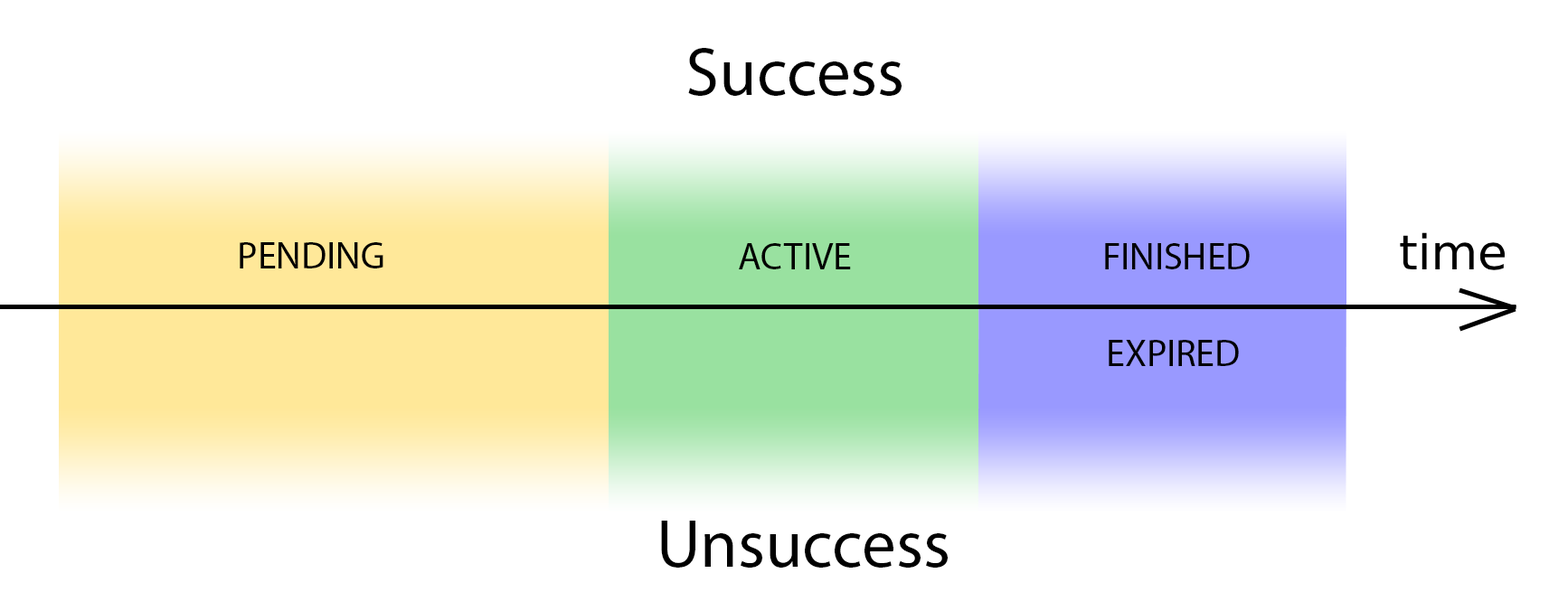
<style>
.page{position:relative;width:1568px;height:611px;background:#ffffff}
.page>*{position:absolute;margin:0}
.t1{font:67.8px "MyriadPro-Regular";color:#000000}
.t2{font:47.9px "DejaVuSans";color:#000000}
.t3{font:38px "MyriadPro-Regular";color:#000000}
</style>
<div class="page">
<p class="t1" style="left:688px;top:48px;width:214px;height:48px">Success</p>
<p class="t2" style="left:1400px;top:232px;width:105px;height:38px">time</p>
<p class="t3" style="left:240px;top:242px;width:143px;height:27px">PENDING</p>
<p class="t3" style="left:739px;top:243px;width:112px;height:26px">ACTIVE</p>
<p class="t3" style="left:1105px;top:243px;width:145px;height:26px">FINISHED</p>
<p class="t3" style="left:1109px;top:340px;width:130px;height:26px">EXPIRED</p>
<p class="t1" style="left:661px;top:521px;width:287px;height:47px">Unsuccess</p>
</div>
